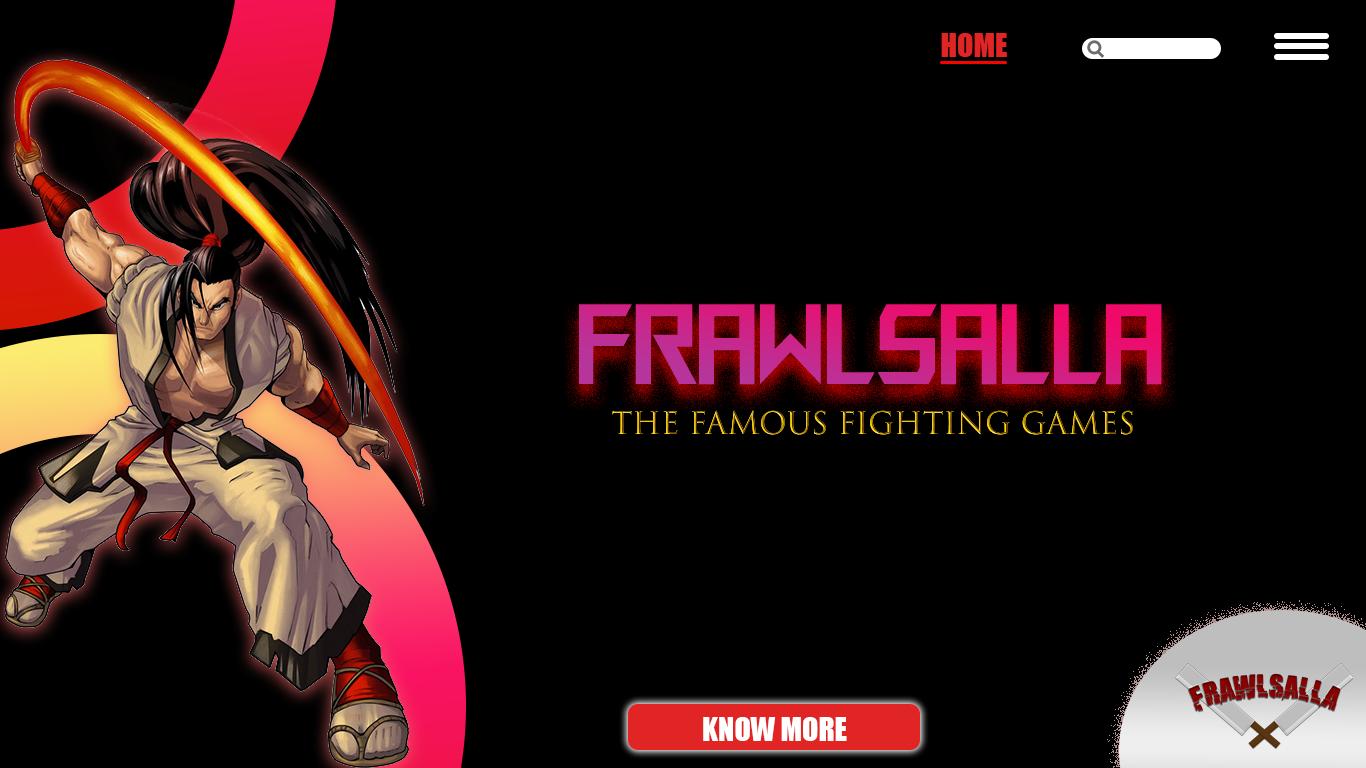
<style>
.page{position:relative;width:1366px;height:768px;background:#000000}
.page>*{position:absolute;margin:0}
.t1{font:30px "Impact";color:#e12525}
.t2{font:113.9px "ROGFonts-Regular";color:#d12084;scale:0.61 1}
.t3{font:30px "TrajanColor-Concept"}
.t4{font:30px "Impact";color:#ffffff}
</style>
<div class="page">
<p class="t1" style="left:941px;top:33px;width:66px;height:24px">HOME</p>
<p class="t2" style="left:579px;top:304px;width:583px;height:81px">FRAWLSALLA</p>
<p class="t3" style="left:612px;top:410px;width:521px;height:25px">THE FAMOUS FIGHTING GAMES</p>
<p class="t4" style="left:703px;top:717px;width:144px;height:24px">KNOW MORE</p>
</div>
